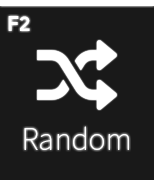
<style>
.page{position:relative;width:154px;height:180px;background:#191919}
.page>*{position:absolute;margin:0}
.t1{font:20.8px "ProductSans-Bold";color:#ffffff}
.t2{font:29.2px "NotoSansCJKkr-Thin";color:#ffffff}
</style>
<div class="page">
<p class="t1" style="left:8px;top:16px;width:22px;height:15px">F2</p>
<p class="t2" style="left:24px;top:126px;width:105px;height:24px">Random</p>
</div>
